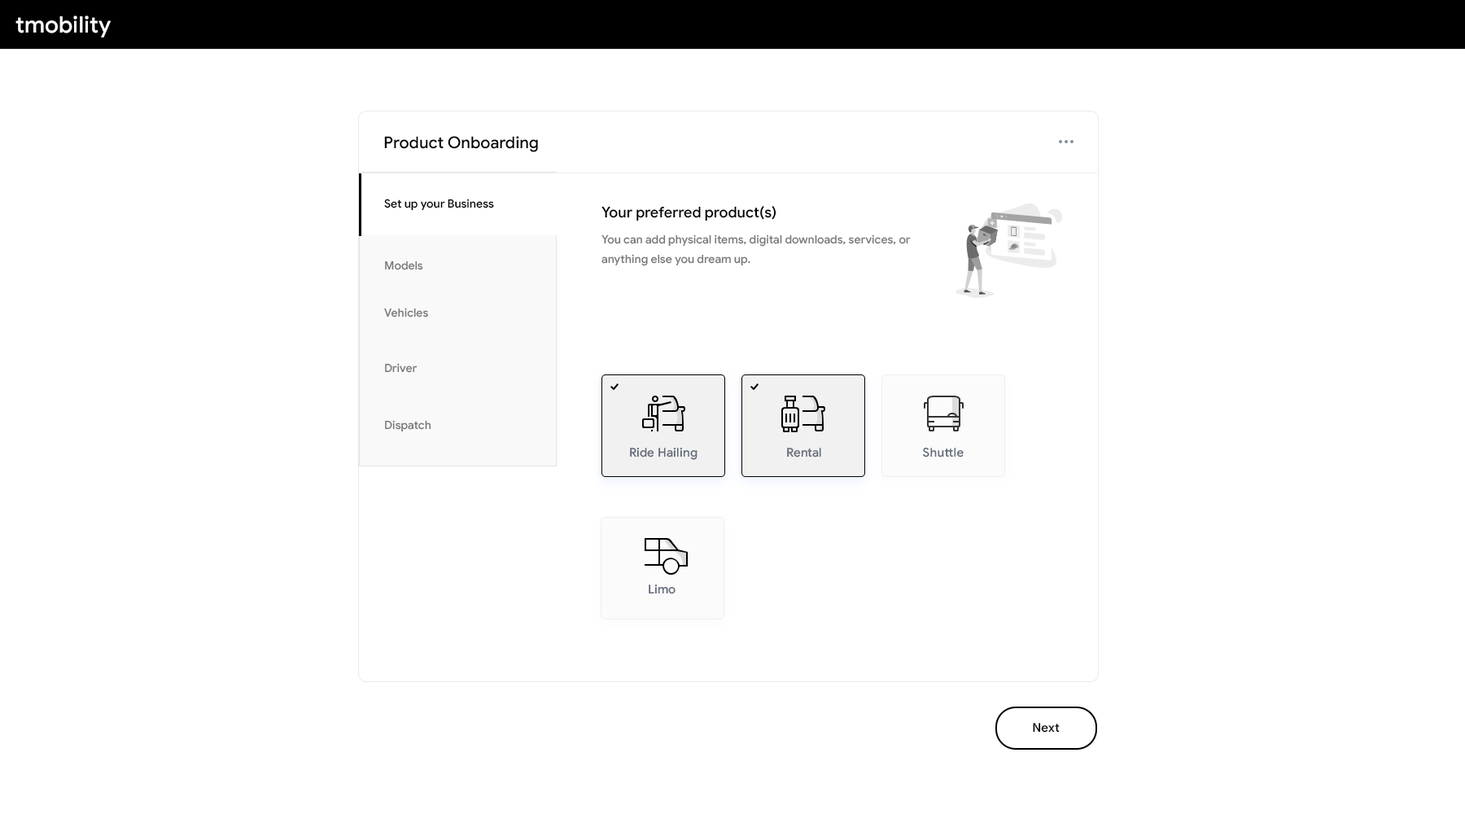
<style>
.page{position:relative;width:1465px;height:814px;background:#ffffff}
.page>*{position:absolute;margin:0}
.t1{font:22.8px "GoogleSans-Medium";color:#ffffff}
.t2{font:16.3px "GoogleSans-Medium";color:#000000}
.t3{font:11.4px "GoogleSans-Medium";color:#000000}
.t4{font:14.7px "GoogleSans-Medium";color:#000000}
.t5{font:11.4px/19.5px "GoogleSans-Medium";color:#777777}
.t6{font:11.4px "GoogleSans-Medium";color:#777777}
.t7{font:12.2px "GoogleSans-Medium";color:#606978}
.t8{font:12.2px "GoogleSans-Medium";letter-spacing:0.01em;color:#000000}
</style>
<div class="page">
<p class="t1" style="left:15px;top:15px;width:96px;height:22px">tmobility</p>
<p class="t2" style="left:384px;top:136px;width:154px;height:16px">Product Onboarding</p>
<p class="t3" style="left:384px;top:199px;width:110px;height:12px">Set up your Business</p>
<p class="t4" style="left:601px;top:206px;width:175px;height:15px">Your preferred product(s)</p>
<p class="t5" style="left:601px;top:234px;width:310px;height:32px">You can add physical items, digital downloads, services, or anything else you dream up.</p>
<p class="t6" style="left:385px;top:260px;width:38px;height:10px">Models</p>
<p class="t6" style="left:384px;top:308px;width:44px;height:9px">Vehicles</p>
<p class="t6" style="left:385px;top:363px;width:33px;height:10px">Driver</p>
<p class="t6" style="left:385px;top:420px;width:46px;height:12px">Dispatch</p>
<p class="t7" style="left:630px;top:448px;width:68px;height:12px">Ride Hailing</p>
<p class="t7" style="left:787px;top:448px;width:34px;height:9px">Rental</p>
<p class="t7" style="left:923px;top:447px;width:41px;height:10px">Shuttle</p>
<p class="t7" style="left:649px;top:584px;width:27px;height:10px">Limo</p>
<p class="t8" style="left:1033px;top:723px;width:27px;height:10px">Next</p>
</div>
